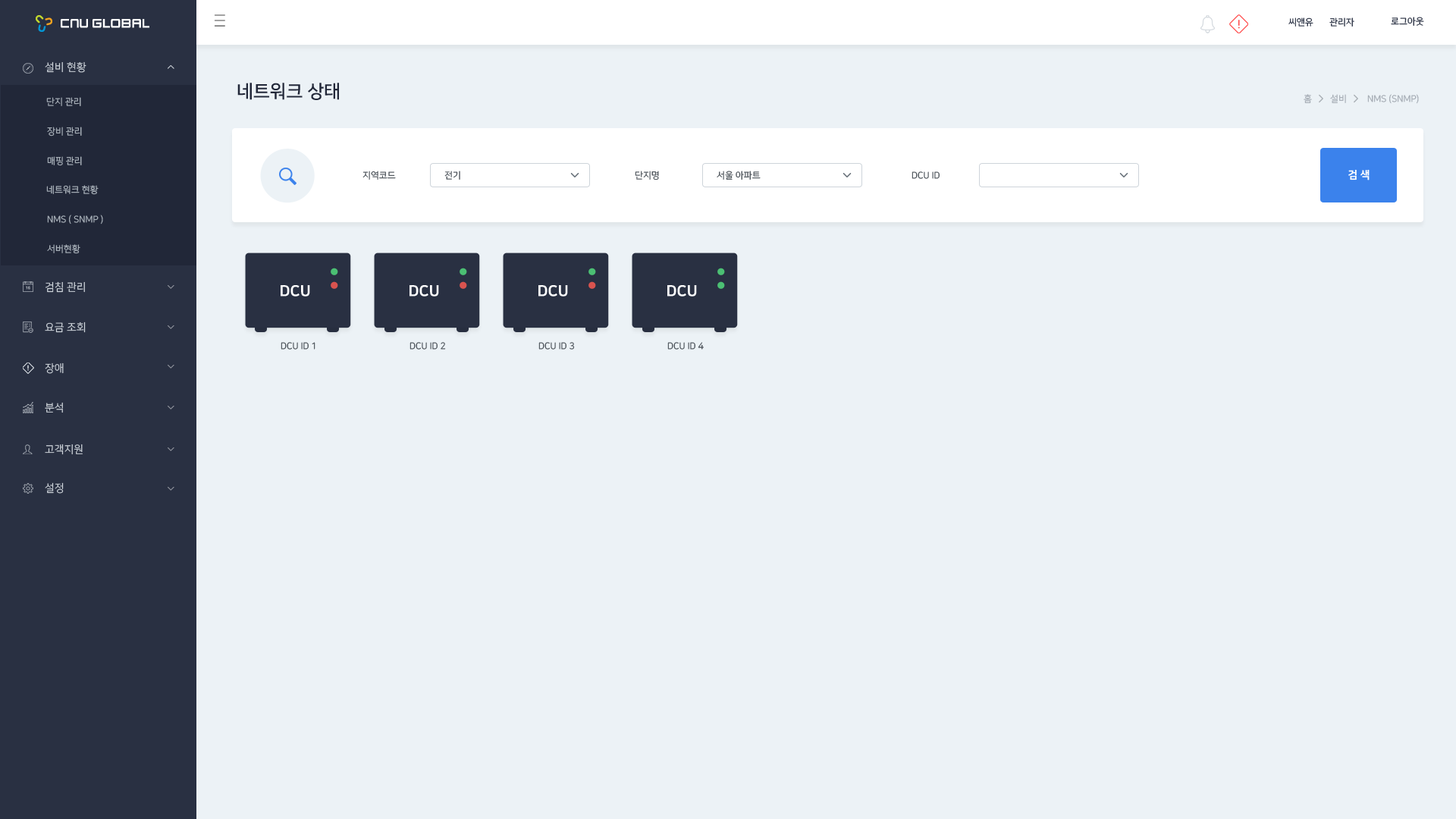
<style>
.page{position:relative;width:1456px;height:819px;background:#ecf2f6}
.page>*{position:absolute;margin:0}
.t1{font:9.1px "NanumSquareR"}
.t2{font:9.1px "NanumSquareR";color:#293042}
.t3{font:9.1px "NanumSquareR";color:#36383a}
.t4{font:10.6px "NanumSquareR";color:#ced4da}
.t5{font:18.2px "NanumSquareB";color:#212738}
.t6{font:9.1px "NanumSquareR";color:#adb5bd}
.t7{font:9.1px "NanumSquareR";color:#a5acb4}
.t8{font:9.1px "NanumSquareR";color:#495057}
.t9{font:10.6px "NanumSquareEB";color:#ffffff}
.t10{font:15.2px "NanumSquareEB";color:#ffffff}
</style>
<div class="page">
<p class="t1" style="left:1288px;top:17px;width:25px;height:10px">씨앤유</p>
<p class="t2" style="left:1329px;top:17px;width:25px;height:10px">관리자</p>
<p class="t3" style="left:1391px;top:17px;width:33px;height:9px">로그아웃</p>
<p class="t4" style="left:45px;top:61px;width:41px;height:12px">설비 현황</p>
<p class="t5" style="left:237px;top:83px;width:102px;height:17px">네트워크 상태​</p>
<p class="t6" style="left:46px;top:97px;width:35px;height:9px">단지 관리</p>
<p class="t7" style="left:1304px;top:94px;width:8px;height:9px">홈</p>
<p class="t1" style="left:1330px;top:94px;width:16px;height:9px">설비</p>
<p class="t7" style="left:1367px;top:94px;width:52px;height:10px">NMS (SNMP)</p>
<p class="t6" style="left:47px;top:127px;width:35px;height:9px">장비 관리</p>
<p class="t6" style="left:47px;top:156px;width:35px;height:10px">매핑 관리</p>
<p class="t1" style="left:362px;top:171px;width:34px;height:9px">지역코드</p>
<p class="t8" style="left:444px;top:171px;width:16px;height:9px">전기</p>
<p class="t1" style="left:635px;top:171px;width:24px;height:9px">단지명</p>
<p class="t8" style="left:717px;top:171px;width:44px;height:9px">서울 아파트</p>
<p class="t1" style="left:912px;top:171px;width:28px;height:8px">DCU ID</p>
<p class="t9" style="left:1348px;top:169px;width:22px;height:11px">검 색</p>
<p class="t6" style="left:46px;top:185px;width:53px;height:10px">네트워크 현황</p>
<p class="t6" style="left:47px;top:215px;width:56px;height:9px">NMS ( SNMP )</p>
<p class="t6" style="left:47px;top:244px;width:33px;height:10px">서버현황</p>
<p class="t4" style="left:45px;top:281px;width:40px;height:12px">검침 관리</p>
<p class="t10" style="left:281px;top:285px;width:29px;height:12px">DCU</p>
<p class="t10" style="left:409px;top:285px;width:30px;height:12px">DCU</p>
<p class="t10" style="left:538px;top:285px;width:30px;height:12px">DCU</p>
<p class="t10" style="left:667px;top:285px;width:30px;height:12px">DCU</p>
<p class="t4" style="left:45px;top:322px;width:41px;height:11px">요금 조회</p>
<p class="t8" style="left:281px;top:342px;width:34px;height:8px">DCU ID 1</p>
<p class="t8" style="left:409px;top:342px;width:37px;height:8px">DCU ID 2</p>
<p class="t8" style="left:538px;top:342px;width:37px;height:8px">DCU ID 3</p>
<p class="t8" style="left:667px;top:342px;width:37px;height:8px">DCU ID 4</p>
<p class="t4" style="left:45px;top:362px;width:19px;height:12px">장애</p>
<p class="t4" style="left:45px;top:402px;width:18px;height:11px">분석</p>
<p class="t4" style="left:45px;top:444px;width:38px;height:11px">고객지원</p>
<p class="t4" style="left:45px;top:482px;width:19px;height:12px">설정</p>
</div>
